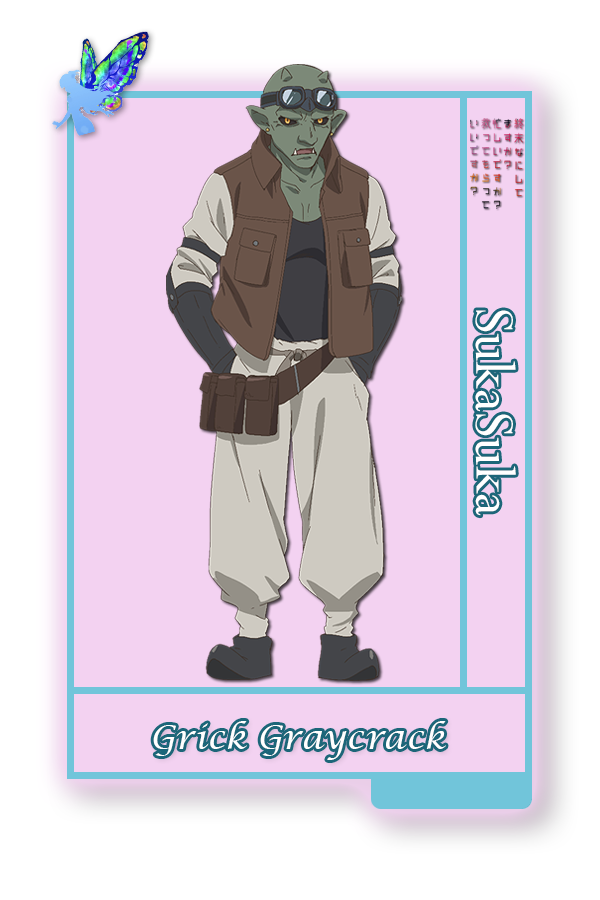
<style>
.page{position:relative;width:600px;height:900px;background:#f3d2f1}
.page>*{position:absolute;margin:0}
.t1{font:62.5px "Perpetua";color:#ffffff}
.t2{font:33.3px "LucidaCalligraphy-Italic";color:#ffffff}
</style>
<div class="page">
<p class="t1" style="left:475px;top:310px;width:41px;height:206px;rotate:90deg">SukaSuka</p>
<p class="t2" style="left:153px;top:721px;width:293px;height:39px">Grick Graycrack</p>
</div>
